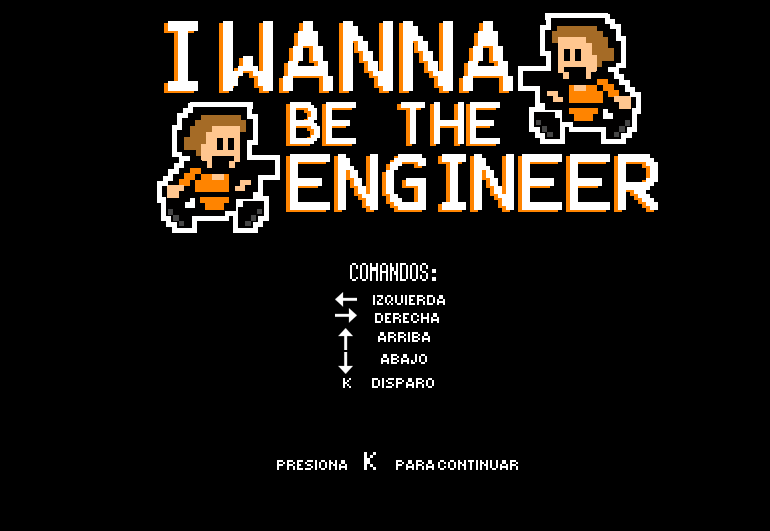
<style>
.page{position:relative;width:770px;height:531px;background:#000000}
.page>*{position:absolute;margin:0}
.t1{font:80px "Terminal";color:#ffffff;text-transform:uppercase}
.t2{font:48px "Terminal";color:#ffffff;text-transform:uppercase}
.t3{font:64px "Terminal";color:#ffffff;text-transform:uppercase}
.t4{font:24px "Terminal";color:#ffffff;text-transform:uppercase}
.t5{font:14.7px "Small Fonts";color:#ffffff;text-transform:uppercase}
.t6{font:24px "Small Fonts";color:#ffffff;text-transform:uppercase}
</style>
<div class="page">
<p class="t1" style="left:168px;top:21px;width:345px;height:70px">i wanna</p>
<p class="t2" style="left:290px;top:102px;width:210px;height:42px">be the</p>
<p class="t3" style="left:290px;top:154px;width:176px;height:56px">engi</p>
<p class="t3" style="left:474px;top:154px;width:184px;height:56px">neer</p>
<p class="t4" style="left:350px;top:263px;width:86px;height:18px">comandos:</p>
<p class="t5" style="left:373px;top:295px;width:72px;height:10px">izquierda</p>
<p class="t5" style="left:375px;top:313px;width:64px;height:10px">derecha</p>
<p class="t5" style="left:378px;top:332px;width:52px;height:10px">arriba</p>
<p class="t5" style="left:381px;top:354px;width:46px;height:10px">abajo</p>
<p class="t5" style="left:343px;top:378px;width:8px;height:10px">k</p>
<p class="t5" style="left:372px;top:378px;width:62px;height:10px">disparo</p>
<p class="t5" style="left:277px;top:452px;width:241px;height:18px">Presiona       <span class="t6">K</span>         para continuar</p>
</div>
